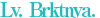
<style>
.page{position:relative;width:100px;height:18px;background:#ffffff}
.page>*{position:absolute;margin:0}
.t1{font:20px "RyuminPro-ExBold";letter-spacing:-0.12em;color:#1cbdc0}
</style>
<div class="page">
<p class="t1" style="left:0px;top:2px;width:95px;height:18px">Lv.  Brktnya.</p>
</div>
